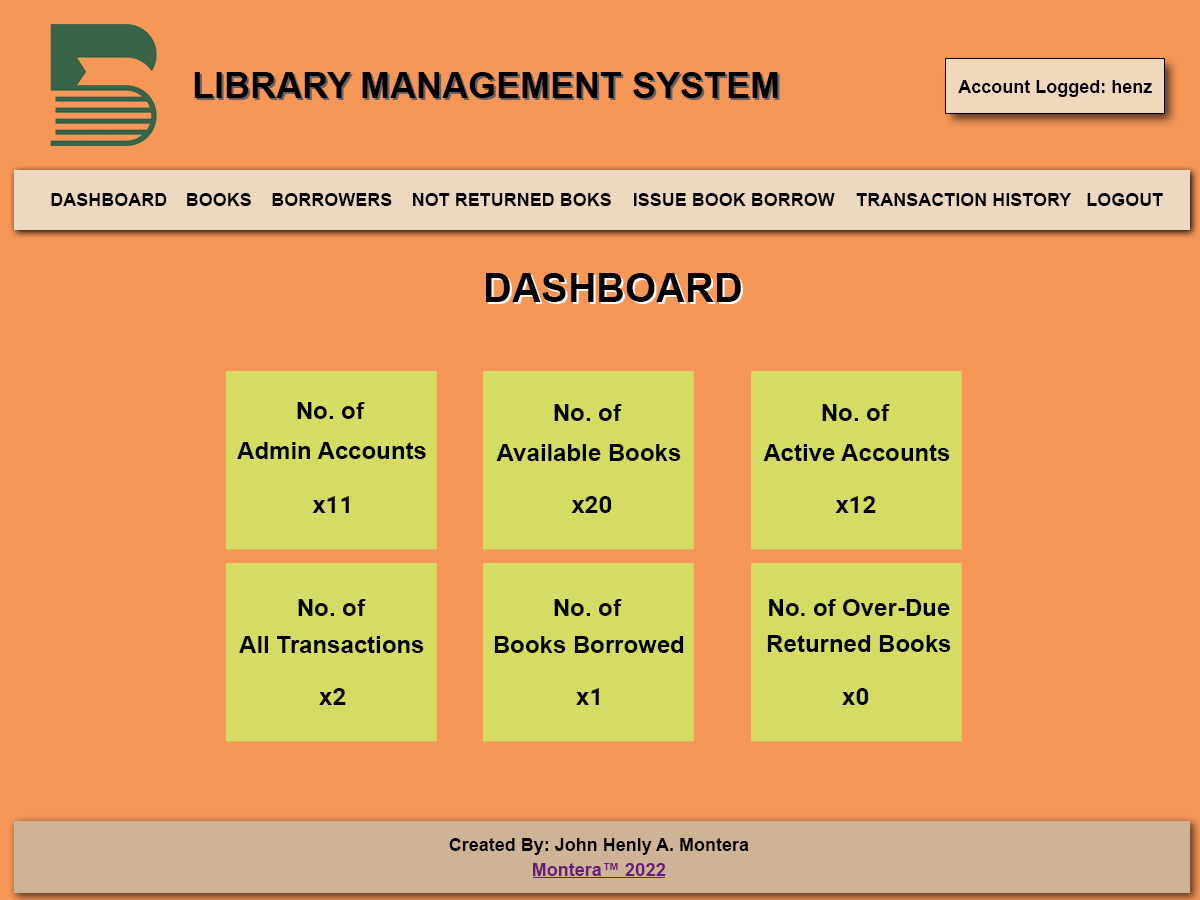
<style>
.page{position:relative;width:1200px;height:900px;background:#f69657}
.page>*{position:absolute;margin:0}
.t1{font:36px "Arial-BoldMT";color:#000000}
.t2{font:18px "Arial-BoldMT";color:#000000}
.t3{font:40px "Arial-BoldMT";color:#000000}
.t4{font:24px "Arial-BoldMT";color:#000000}
.t5{font:24px "Roboto-Bold";color:#000000}
.t6{font:18px "Arial-BoldMT";color:#681a79}
.t7{font:18px "Roboto-Bold";color:#681a79}
</style>
<div class="page">
<p class="t1" style="left:194px;top:72px;width:584px;height:26px">LIBRARY MANAGEMENT SYSTEM</p>
<p class="t2" style="left:958px;top:80px;width:194px;height:17px">Account Logged: henz</p>
<p class="t2" style="left:51px;top:193px;width:116px;height:13px">DASHBOARD</p>
<p class="t2" style="left:187px;top:193px;width:64px;height:13px">BOOKS</p>
<p class="t2" style="left:272px;top:193px;width:120px;height:13px">BORROWERS</p>
<p class="t2" style="left:413px;top:193px;width:198px;height:13px">NOT RETURNED BOKS</p>
<p class="t2" style="left:634px;top:193px;width:201px;height:13px">ISSUE BOOK BORROW</p>
<p class="t2" style="left:856px;top:193px;width:216px;height:13px">TRANSACTION HISTORY</p>
<p class="t2" style="left:1087px;top:193px;width:76px;height:13px">LOGOUT</p>
<p class="t3" style="left:486px;top:273px;width:255px;height:29px">DASHBOARD</p>
<p class="t4" style="left:297px;top:402px;width:68px;height:17px">No. of</p>
<p class="t4" style="left:554px;top:404px;width:68px;height:17px">No. of</p>
<p class="t4" style="left:822px;top:404px;width:68px;height:17px">No. of</p>
<p class="t4" style="left:237px;top:442px;width:189px;height:17px">Admin Accounts</p>
<p class="t4" style="left:496px;top:444px;width:185px;height:17px">Available Books</p>
<p class="t4" style="left:763px;top:444px;width:187px;height:17px">Active Accounts</p>
<p class="t5" style="left:312px;top:496px;width:37px;height:17px"><span class="t4">x</span>11</p>
<p class="t5" style="left:571px;top:496px;width:41px;height:17px"><span class="t4">x</span>20</p>
<p class="t5" style="left:835px;top:496px;width:41px;height:17px"><span class="t4">x</span>12</p>
<p class="t4" style="left:298px;top:599px;width:68px;height:17px">No. of</p>
<p class="t4" style="left:554px;top:599px;width:68px;height:17px">No. of</p>
<p class="t4" style="left:769px;top:599px;width:181px;height:17px">No. of Over-Due</p>
<p class="t4" style="left:239px;top:636px;width:185px;height:17px">All Transactions</p>
<p class="t4" style="left:494px;top:636px;width:190px;height:17px">Books Borrowed</p>
<p class="t4" style="left:767px;top:635px;width:184px;height:17px">Returned Books</p>
<p class="t4" style="left:319px;top:688px;width:27px;height:17px">x<span class="t5">2</span></p>
<p class="t4" style="left:576px;top:688px;width:23px;height:17px">x<span class="t5">1</span></p>
<p class="t4" style="left:842px;top:688px;width:27px;height:17px">x<span class="t5">0</span></p>
<p class="t2" style="left:449px;top:838px;width:300px;height:17px">Created By: John Henly A. Montera</p>
<p class="t6" style="left:533px;top:863px;width:133px;height:13px">Montera™ <span class="t7">2022</span></p>
</div>
